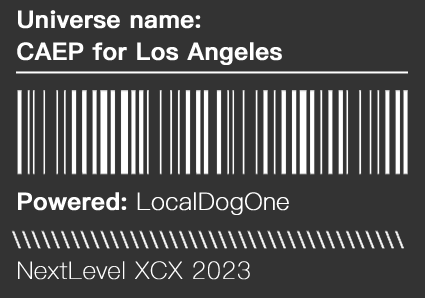
<style>
.page{position:relative;width:425px;height:298px;background:#333333}
.page>*{position:absolute;margin:0}
.t1{font:24px "PingFang-SC-Heavy";color:#ffffff;font-weight:bold}
.t2{font:24px "PingFang-SC-Light";color:#ffffff;font-weight:bold}
.t3{font:24px "PingFang-SC-ExtraLight";color:#ffffff;font-weight:bold}
</style>
<div class="page">
<p class="t1" style="left:18px;top:10px;width:183px;height:19px">Universe name:</p>
<p class="t1" style="left:17px;top:42px;width:265px;height:23px">CAEP for Los Angeles</p>
<p class="t2" style="left:18px;top:192px;width:271px;height:23px"><span class="t1">Powered: </span>LocalDogOne</p>
<p class="t3" style="left:18px;top:261px;width:232px;height:19px">NextLevel XCX 2023</p>
</div>
